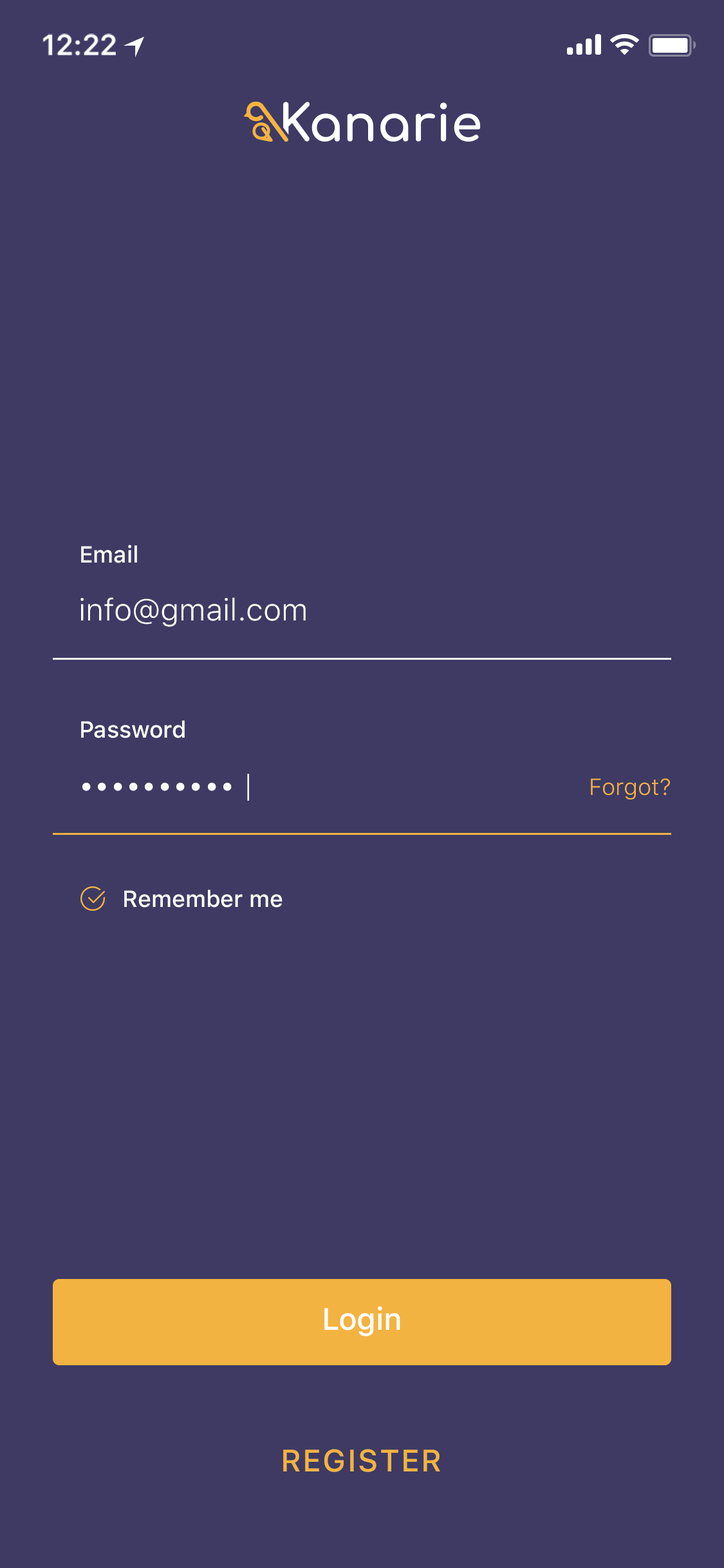
<style>
.page{position:relative;width:724px;height:1568px;background:#3e3a63}
.page>*{position:absolute;margin:0}
.t1{font:29px "SFProText-Semibold";letter-spacing:-0.02em;color:#ffffff}
.t2{font:23.2px "SFProText-Medium";color:#ffffff}
.t3{font:30.9px "SFProText-Light";color:#ffffff}
.t4{font:30.9px "SFUIText-Light";color:#ffffff}
.t5{font:23.2px "SFProText-Light";color:#f3b341}
.t6{font:30.9px "SFProText-Medium";letter-spacing:-0.01em;color:#ffffff}
.t7{font:30.9px "SFProText-Medium";letter-spacing:0.05em;color:#f3b341;text-transform:uppercase}
</style>
<div class="page">
<p class="t1" style="left:42px;top:33px;width:74px;height:23px">12:22</p>
<p class="t2" style="left:81px;top:545px;width:56px;height:18px">Email</p>
<p class="t3" style="left:80px;top:597px;width:226px;height:30px">info@gmail.com</p>
<p class="t2" style="left:81px;top:720px;width:104px;height:18px">Password</p>
<p class="t4" style="left:82px;top:774px;width:167px;height:27px">•••••••••• |</p>
<p class="t5" style="left:591px;top:778px;width:79px;height:21px">Forgot?</p>
<p class="t2" style="left:124px;top:890px;width:159px;height:18px">Remember me</p>
<p class="t6" style="left:324px;top:1306px;width:76px;height:30px">Login</p>
<p class="t7" style="left:283px;top:1449px;width:157px;height:23px">Register</p>
</div>
